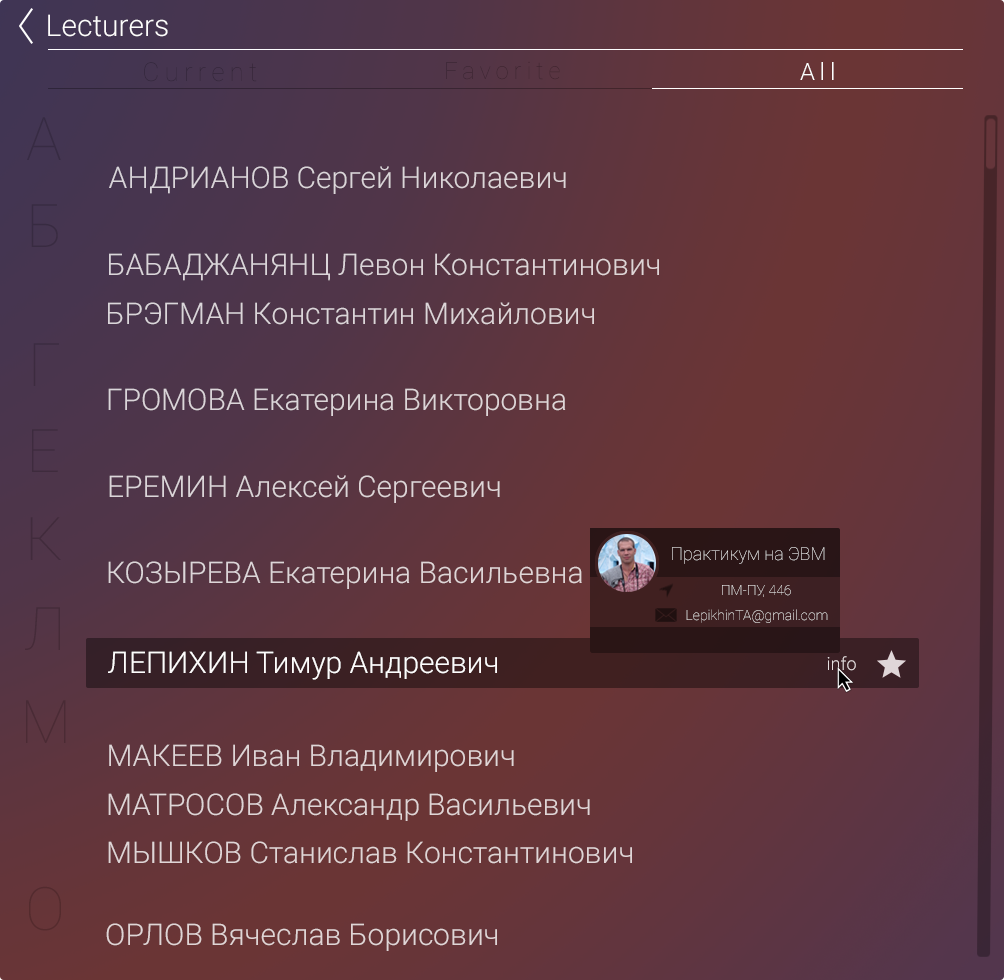
<style>
.page{position:relative;width:1004px;height:980px}
.page>*{position:absolute;margin:0}
.t1{font:30px "Roboto-Light";color:#fefdfd}
.t2{font:26px "Roboto-Thin";letter-spacing:0.2em}
.t3{font:24px "Roboto-Thin";letter-spacing:0.2em}
.t4{font:24px "Roboto-Light";letter-spacing:0.2em;color:#fefefe}
.t5{font:60px "Roboto-Thin";color:#372b43}
.t6{font:30px "Roboto-Light";color:#dbd5d9}
.t7{font:60px "Roboto-Thin";color:#372b41}
.t8{font:60px "Roboto-Thin";color:#3c2b3f}
.t9{font:30px "Roboto-Light";color:#dcd5d8}
.t10{font:60px "Roboto-Thin";color:#3e2b3e}
.t11{font:60px "Roboto-Thin";color:#412b3c}
.t12{font:18px "Roboto-Thin"}
.t13{font:30px "Roboto-Light";color:#ded5d7}
.t14{font:30px "Roboto-Light";color:#ded5d7;text-transform:uppercase}
.t15{font:14px "Roboto-Thin"}
.t16{font:60px "Roboto-Thin";color:#452b39}
.t17{font:18px "Roboto-Light";color:#e5dfe0}
.t18{font:60px "Roboto-Thin";color:#4b2b35}
.t19{font:30px "Roboto-Light";color:#dfd5d6}
.t20{font:30px "Roboto-Light";color:#e0d5d5}
.t21{font:30px "Roboto-Light";color:#e0d5d6}
.t22{font:60px "Roboto-Thin";color:#542b2d}
</style>
<div class="page">
<p class="t1" style="left:48px;top:14px;width:120px;height:23px">Lecturers</p>
<p class="t2" style="left:144px;top:62px;width:113px;height:20px">Current</p>
<p class="t3" style="left:446px;top:61px;width:114px;height:19px">Favorite</p>
<p class="t3" style="left:800px;top:62px;width:33px;height:18px">All</p>
<p class="t4" style="left:800px;top:62px;width:34px;height:18px">All</p>
<p class="t5" style="left:27px;top:117px;width:34px;height:43px">A</p>
<p class="t6" style="left:109px;top:166px;width:457px;height:28px">АНДРИАНОВ Сергей Николаевич</p>
<p class="t7" style="left:31px;top:204px;width:27px;height:43px">Б</p>
<p class="t6" style="left:109px;top:253px;width:550px;height:28px">БАБАДЖАНЯНЦ Левон Константинович</p>
<p class="t6" style="left:108px;top:302px;width:486px;height:23px">БРЭГМАН Константин Михайлович</p>
<p class="t8" style="left:33px;top:343px;width:26px;height:43px">Г</p>
<p class="t9" style="left:108px;top:388px;width:458px;height:28px">ГРОМОВА Екатерина Викторовна</p>
<p class="t10" style="left:32px;top:429px;width:26px;height:43px">Е</p>
<p class="t9" style="left:109px;top:475px;width:391px;height:28px">ЕРЕМИН Алексей Сергеевич</p>
<p class="t11" style="left:30px;top:517px;width:31px;height:43px">К</p>
<p class="t12" style="left:672px;top:547px;width:153px;height:17px">Практикум на ЭВМ</p>
<p class="t13" style="left:108px;top:561px;width:474px;height:28px"><span class="t14">Козырева</span> Екатерина Васильевна</p>
<p class="t15" style="left:722px;top:585px;width:69px;height:12px">ПМ-ПУ, 446</p>
<p class="t16" style="left:25px;top:607px;width:35px;height:43px">Л</p>
<p class="t15" style="left:686px;top:609px;width:142px;height:14px">LepikhinTA@gmail.com</p>
<p class="t1" style="left:108px;top:651px;width:389px;height:29px">ЛЕПИХИН Тимур Андреевич</p>
<p class="t1" style="left:108px;top:651px;width:389px;height:29px">ЛЕПИХИН Тимур Андреевич</p>
<p class="t17" style="left:827px;top:656px;width:29px;height:15px">info</p>
<p class="t18" style="left:26px;top:700px;width:40px;height:43px">М</p>
<p class="t19" style="left:109px;top:744px;width:405px;height:28px">МАКЕЕВ Иван Владимирович</p>
<p class="t20" style="left:108px;top:793px;width:482px;height:28px">МАТРОСОВ Александр Васильевич</p>
<p class="t21" style="left:108px;top:841px;width:524px;height:23px">МЫШКОВ Станислав Константинович</p>
<p class="t22" style="left:29px;top:886px;width:32px;height:45px">О</p>
<p class="t20" style="left:106px;top:923px;width:391px;height:28px">ОРЛОВ Вячеслав Борисович</p>
</div>
